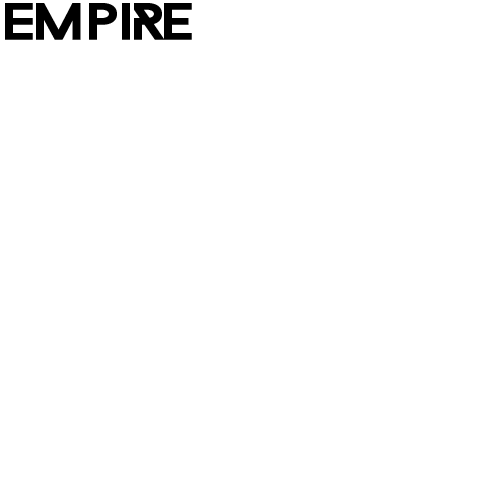
<style>
.page{position:relative;width:500px;height:500px;background:#ffffff}
.page>*{position:absolute;margin:0}
.t1{font:51.4px "Droidiga";letter-spacing:-0.09em;color:#010101;font-weight:bold;scale:1.1 1}
</style>
<div class="page">
<p class="t1" style="left:5px;top:3px;width:187px;height:37px">Empire</p>
</div>
